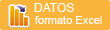
<style>
.page{position:relative;width:110px;height:30px;background:#f9b43c}
.page>*{position:absolute;margin:0}
.t1{font:12px "ArialMT";color:#fffdfd}
.t2{font:11px "ArialMT";color:#fffdfd}
</style>
<div class="page">
<p class="t1" style="left:34px;top:3px;width:40px;height:9px">DATOS</p>
<p class="t2" style="left:35px;top:16px;width:67px;height:8px">formato Excel</p>
</div>
